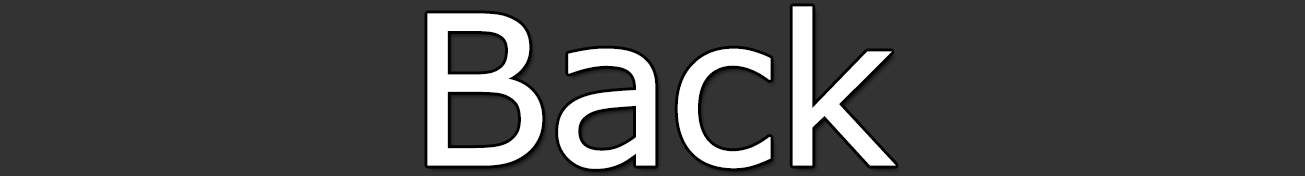
<style>
.page{position:relative;width:1305px;height:176px;background:#333333}
.page>*{position:absolute;margin:0}
.t1{font:209px "Verdana";color:#ffffff}
</style>
<div class="page">
<p class="t1" style="left:427px;top:6px;width:469px;height:163px">Back</p>
</div>
